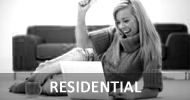
<style>
.page{position:relative;width:190px;height:100px}
.page>*{position:absolute;margin:0}
.t1{font:16.7px "Calibri";color:#ffffff;font-weight:bold}
</style>
<div class="page">
<p class="t1" style="left:50px;top:81px;width:92px;height:12px">RESIDENTIAL</p>
</div>
